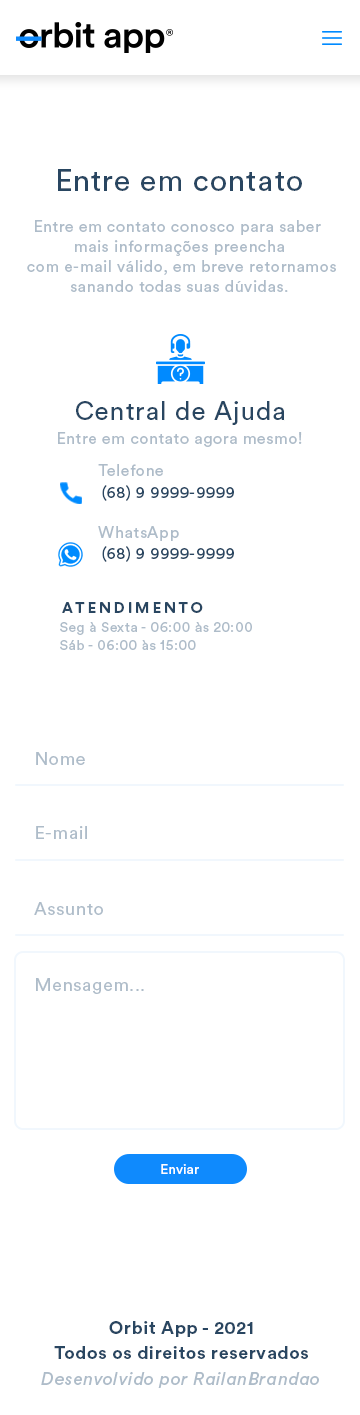
<style>
.page{position:relative;width:360px;height:1415px;background:#ffffff}
.page>*{position:absolute;margin:0}
.t1{font:30px "CircularStd-Book";letter-spacing:0.036em;color:#294661}
.t2{font:16px/20px "CircularStd-Book";letter-spacing:0.036em;color:#aebcc9}
.t3{font:26px "CircularStd-Book";letter-spacing:0.036em;color:#294661}
.t4{font:16px "CircularStd-Book";letter-spacing:0.036em;color:#aebcc9}
.t5{font:16px "CircularStd-Book";letter-spacing:0.036em;color:#294661}
.t6{font:15px "CircularStd-Bold";letter-spacing:0.2em;color:#294661}
.t7{font:14px/18px "CircularStd-Book";letter-spacing:0.036em;color:#aebcc9}
.t8{font:18px "CircularStd-Book";letter-spacing:0.036em;color:#aebcc9}
.t9{font:14px "CircularStd-Book";color:#feffff}
.t10{font:18.1px/25.1px "CircularStd-Bold";letter-spacing:0.036em;color:#294661}
.t11{font:18px "CircularStd-BookItalic";letter-spacing:0.036em;color:#aebcc9}
</style>
<div class="page">
<p class="t1" style="left:58px;top:169px;width:244px;height:22px">Entre em contato</p>
<p class="t2" style="left:27px;top:220px;width:309px;height:72px;text-align:center">Entre em contato conosco para saber <br>mais informações preencha<br> com e-mail válido, em breve retornamos<br>sanando todas suas dúvidas.</p>
<p class="t3" style="left:76px;top:401px;width:209px;height:24px">Central de Ajuda</p>
<p class="t4" style="left:58px;top:432px;width:244px;height:15px">Entre em contato agora mesmo!</p>
<p class="t4" style="left:98px;top:464px;width:65px;height:12px">Telefone</p>
<p class="t5" style="left:102px;top:485px;width:132px;height:16px">(68) 9 9999-9999</p>
<p class="t4" style="left:98px;top:526px;width:81px;height:15px">WhatsApp</p>
<p class="t5" style="left:102px;top:546px;width:132px;height:16px">(68) 9 9999-9999</p>
<p class="t6" style="left:62px;top:602px;width:141px;height:11px">ATENDIMENTO</p>
<p class="t7" style="left:60px;top:622px;width:192px;height:28px">Seg à Sexta - 06:00 às 20:00<br>Sáb - 06:00 às 15:00</p>
<p class="t8" style="left:36px;top:752px;width:49px;height:13px">Nome</p>
<p class="t8" style="left:36px;top:826px;width:51px;height:13px">E-mail</p>
<p class="t8" style="left:34px;top:902px;width:69px;height:13px">Assunto</p>
<p class="t8" style="left:36px;top:978px;width:108px;height:16px">Mensagem...</p>
<p class="t9" style="left:161px;top:1164px;width:38px;height:10px">Enviar</p>
<p class="t10" style="left:54px;top:1321px;width:254px;height:38px;text-align:center">Orbit App - 2021<br>Todos os direitos reservados</p>
<p class="t11" style="left:41px;top:1372px;width:278px;height:16px">Desenvolvido por RailanBrandao</p>
</div>
